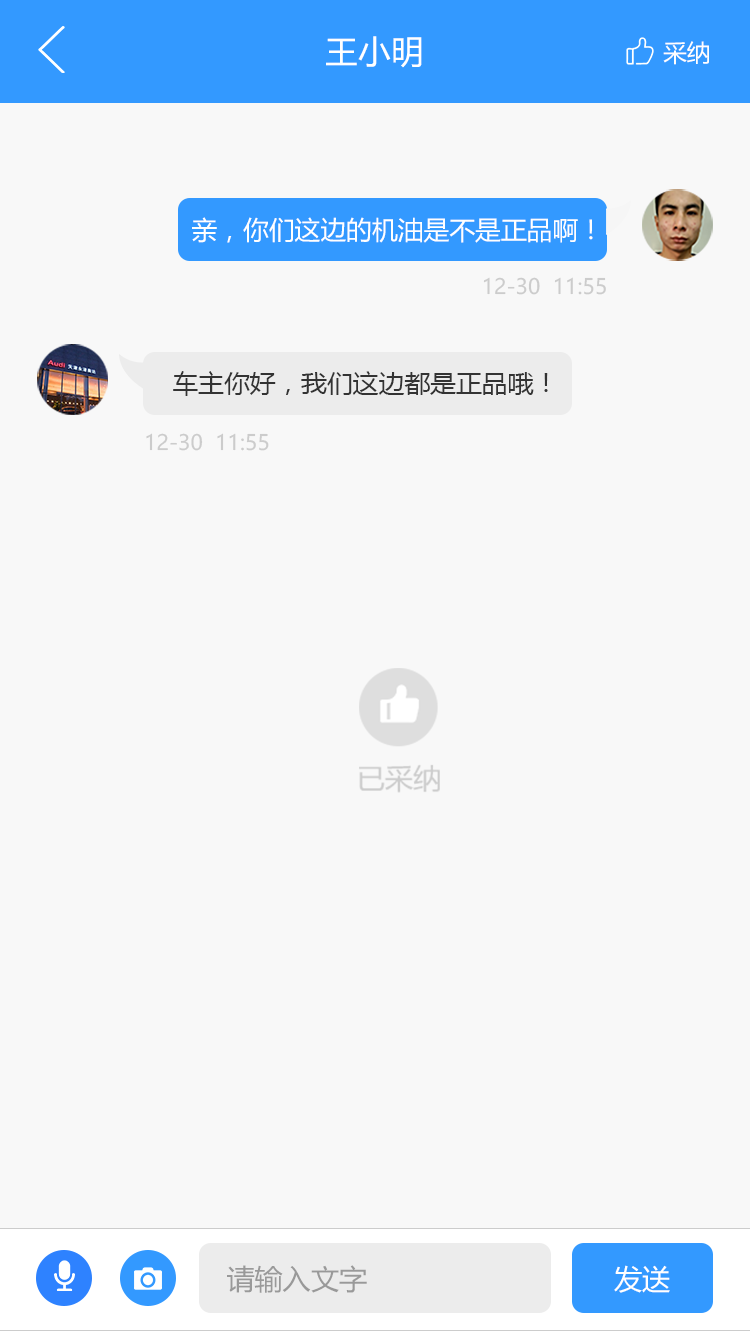
<style>
.page{position:relative;width:750px;height:1331px;background:#f8f8f8}
.page>*{position:absolute;margin:0}
.t1{font:32.6px "MicrosoftYaHei";color:#ffffff}
.t2{font:23.4px "MicrosoftYaHei";color:#ffffff}
.t3{font:25.8px "MicrosoftYaHei";color:#ffffff}
.t4{font:21.1px "MicrosoftYaHei";color:#cccccc}
.t5{font:25.3px "MicrosoftYaHei";color:#333333}
.t6{font:28.1px "MicrosoftYaHei";color:#999999}
.t7{font:28.1px "MicrosoftYaHei";color:#ffffff}
</style>
<div class="page">
<p class="t1" style="left:326px;top:36px;width:96px;height:32px">王小明</p>
<p class="t2" style="left:663px;top:41px;width:46px;height:24px">采纳</p>
<p class="t3" style="left:192px;top:217px;width:401px;height:26px">亲，你们这边的机油是不是正品啊！</p>
<p class="t4" style="left:483px;top:277px;width:123px;height:18px">12-30  11:55</p>
<p class="t5" style="left:173px;top:371px;width:375px;height:25px">车主你好，我们这边都是正品哦！</p>
<p class="t4" style="left:146px;top:433px;width:123px;height:18px">12-30  11:55</p>
<p class="t6" style="left:227px;top:1265px;width:140px;height:28px">请输入文字</p>
<p class="t7" style="left:614px;top:1265px;width:56px;height:28px">发送</p>
</div>
